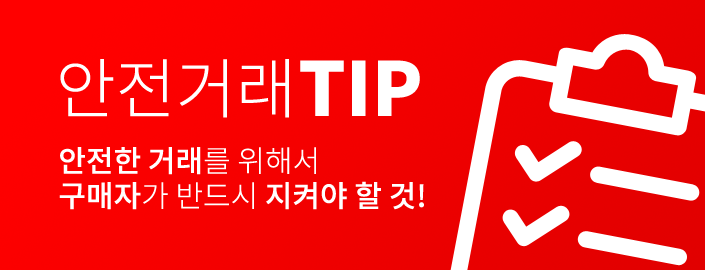
<style>
.page{position:relative;width:705px;height:270px}
.page>*{position:absolute;margin:0}
.t1{font:65.5px "NotoSansCJKkr-Light";color:#ffffff}
.t2{font:74.2px "NotoSansCJKkr-Black";color:#ffffff}
.t3{font:30px "NotoSansCJKkr-Medium";color:#ffffff}
.t4{font:30px "NotoSansCJKkr-Light";color:#ffffff}
</style>
<div class="page">
<p class="t1" style="left:60px;top:59px;width:229px;height:59px">안전거래</p>
<p class="t2" style="left:300px;top:60px;width:120px;height:56px">TIP</p>
<p class="t3" style="left:60px;top:147px;width:256px;height:28px">안전한 거래<span class="t4">를 위해서</span></p>
<p class="t3" style="left:59px;top:181px;width:365px;height:29px">구매자<span class="t4">가 반드시 </span>지켜야 할 것!</p>
</div>
